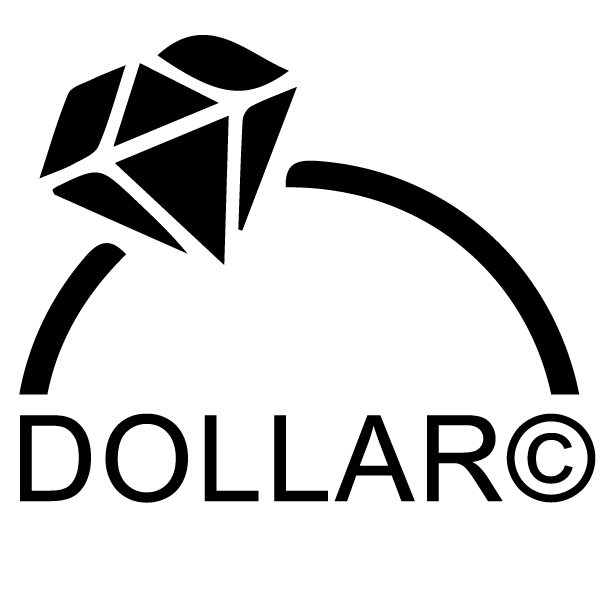
<style>
.page{position:relative;width:600px;height:600px;background:#ffffff}
.page>*{position:absolute;margin:0}
.t1{font:119.2px "ArialMT";color:#000000;text-transform:uppercase;font-weight:bold}
</style>
<div class="page">
<p class="t1" style="left:20px;top:413px;width:576px;height:90px">DOLLAR©</p>
</div>
